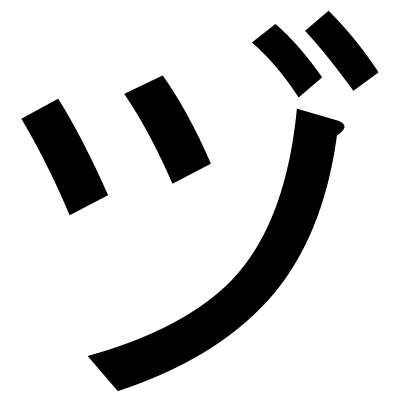
<style>
.page{position:relative;width:400px;height:400px;background:#ffffff}
.page>*{position:absolute;margin:0}
.t1{font:424.8px "MS-PGothic";color:#000000}
</style>
<div class="page">
<p class="t1" style="left:21px;top:10px;width:358px;height:381px">ヅ</p>
</div>
